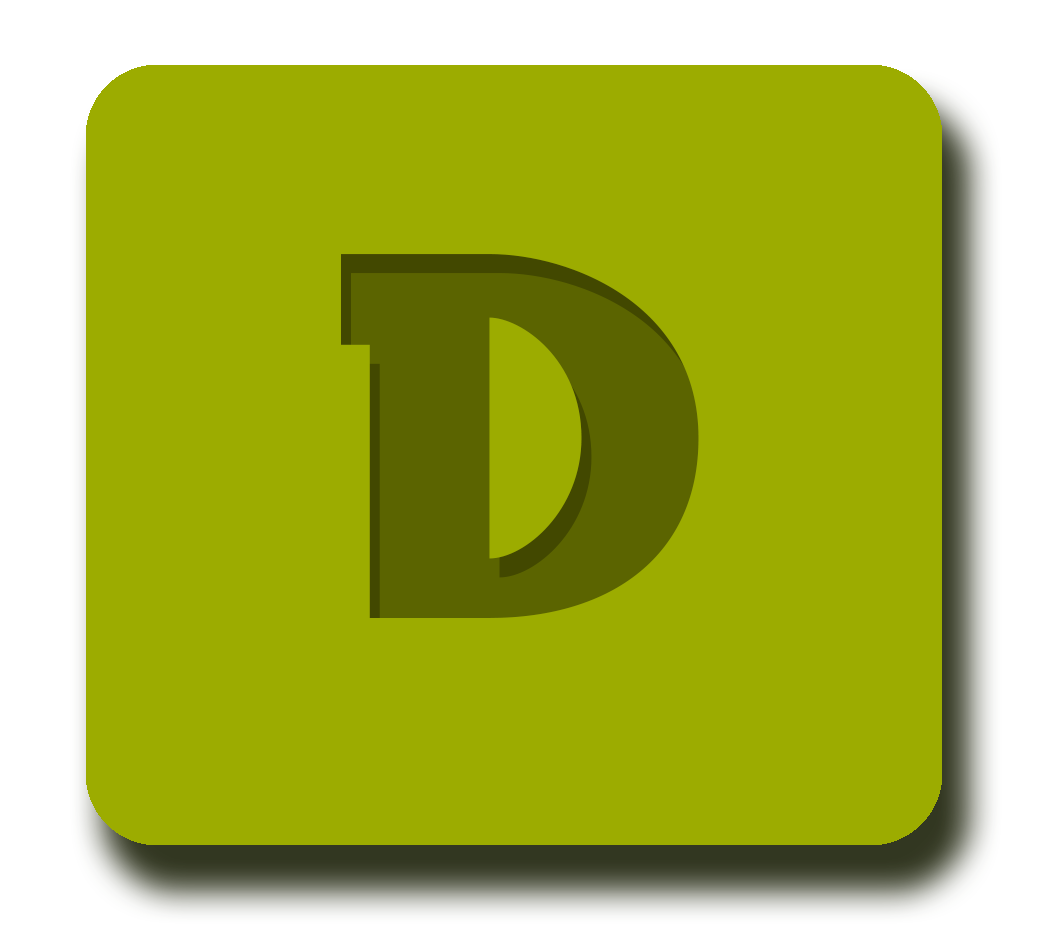
<style>
.page{position:relative;width:1053px;height:930px;background:#9cac00}
.page>*{position:absolute;margin:0}
.t1{font:504.7px "BadTyp-Regular";color:#5b6400}
</style>
<div class="page">
<p class="t1" style="left:341px;top:254px;width:358px;height:364px">d</p>
</div>
